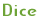
<style>
.page{position:relative;width:40px;height:20px;background:#ffffff}
.page>*{position:absolute;margin:0}
.t1{font:15.9px "ArchitecturePlain";color:#6ea337;scale:1.8 1}
</style>
<div class="page">
<p class="t1" style="left:3px;top:3px;width:34px;height:13px">Dice</p>
</div>
